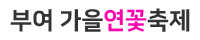
<style>
.page{position:relative;width:200px;height:40px;background:#ffffff}
.page>*{position:absolute;margin:0}
.t1{font:24px "NanumSquareEB";color:#333333}
.t2{font:24px "NanumSquareEB";color:#ff00ae}
</style>
<div class="page">
<p class="t1" style="left:10px;top:8px;width:180px;height:24px">부여 가을<span class="t2">연꽃</span>축제</p>
</div>
